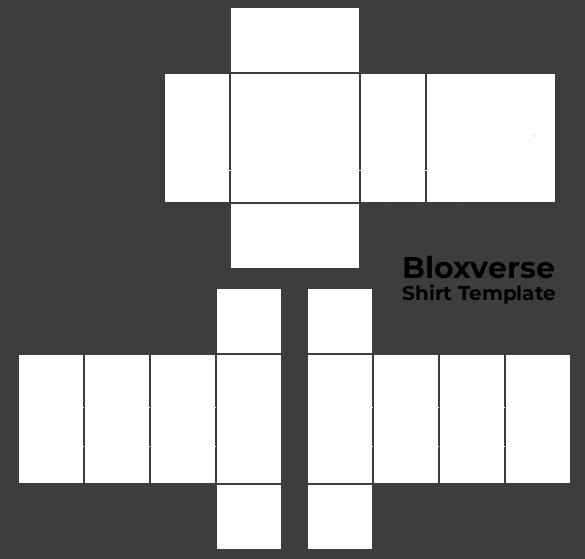
<style>
.page{position:relative;width:585px;height:559px;background:#3d3d3d}
.page>*{position:absolute;margin:0}
.t1{font:20px "Montserrat-Bold";color:#000000}
</style>
<div class="page">
<p class="t1" style="left:402px;top:284px;width:153px;height:20px">Shirt Template</p>
</div>
